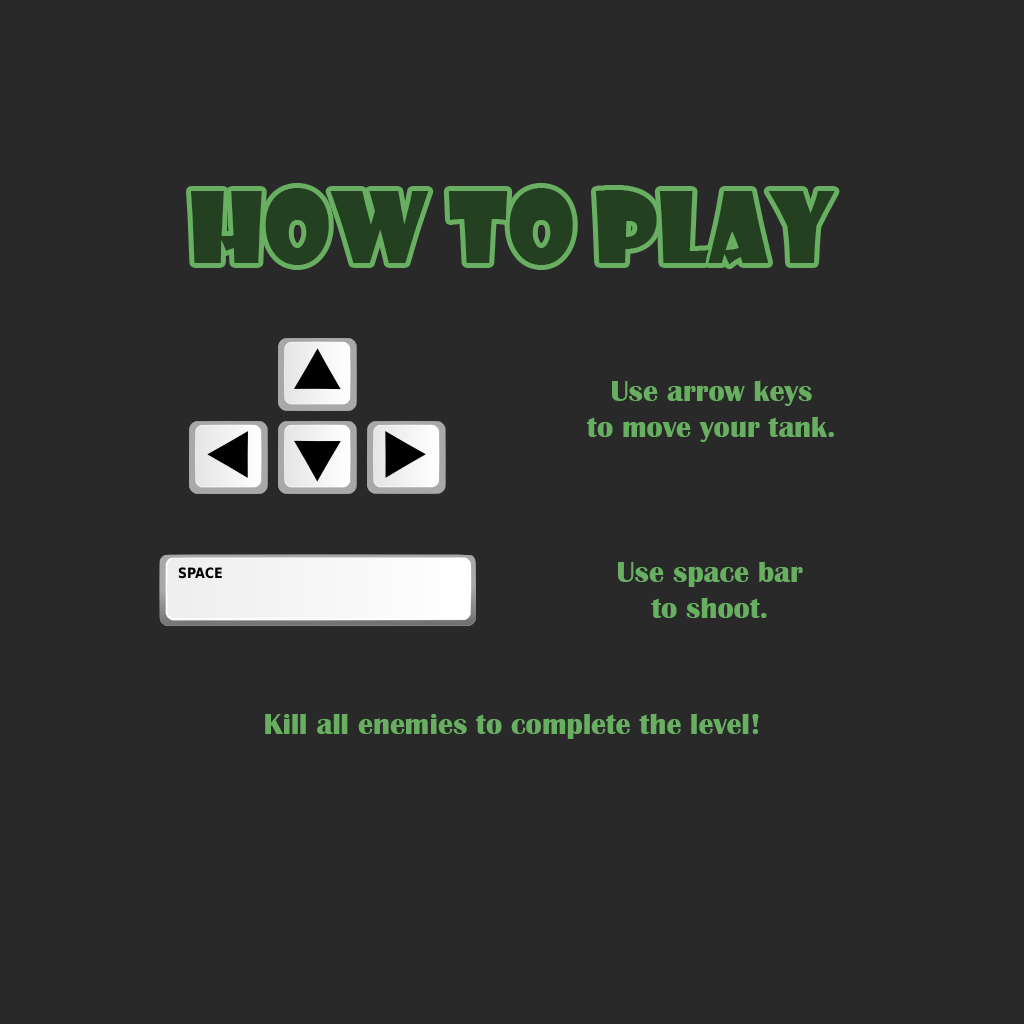
<style>
.page{position:relative;width:1024px;height:1024px;background:#292929}
.page>*{position:absolute;margin:0}
.t1{font:96px "ShowcardGothic-Reg";color:#234021}
.t2{font:30px "BritannicBold";color:#68af62}
</style>
<div class="page">
<p class="t1" style="left:191px;top:188px;width:644px;height:77px">HOW TO PLAY</p>
<p class="t2" style="left:587px;top:380px;width:247px;height:62px;text-align:center">Use arrow keys<br>to move your tank.</p>
<p class="t2" style="left:618px;top:561px;width:185px;height:57px;text-align:center">Use space bar<br>to shoot.</p>
<p class="t2" style="left:265px;top:713px;width:494px;height:26px">Kill all enemies to complete the level!</p>
</div>
